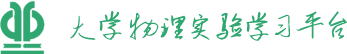
<style>
.page{position:relative;width:347px;height:54px;background:#ffffff}
.page>*{position:absolute;margin:0}
.t1{font:28px "Ò¶¸ùÓÑ¸Ö±ÊÐÐÊé¼òÌå";letter-spacing:0.088em;color:#30a670}
</style>
<div class="page">
<p class="t1" style="left:70px;top:11px;width:140px;height:29px">大学物理实</p>
<p class="t1" style="left:216px;top:12px;width:53px;height:29px">验学</p>
<p class="t1" style="left:274px;top:14px;width:16px;height:23px">习</p>
<p class="t1" style="left:296px;top:11px;width:51px;height:28px">平台</p>
</div>
